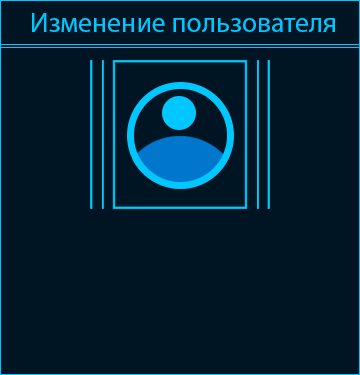
<style>
.page{position:relative;width:360px;height:375px;background:#001523}
.page>*{position:absolute;margin:0}
.t1{font:27.8px "MyriadPro-Regular";color:#00c7ff}
</style>
<div class="page">
<p class="t1" style="left:32px;top:13px;width:303px;height:19px">Изменение пользователя</p>
</div>
